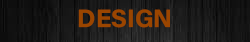
<style>
.page{position:relative;width:250px;height:42px}
.page>*{position:absolute;margin:0}
.t1{font:25px "AcuminConcept-Bold";color:#9a4500}
</style>
<div class="page">
<p class="t1" style="left:78px;top:9px;width:92px;height:19px">DESIGN</p>
</div>
